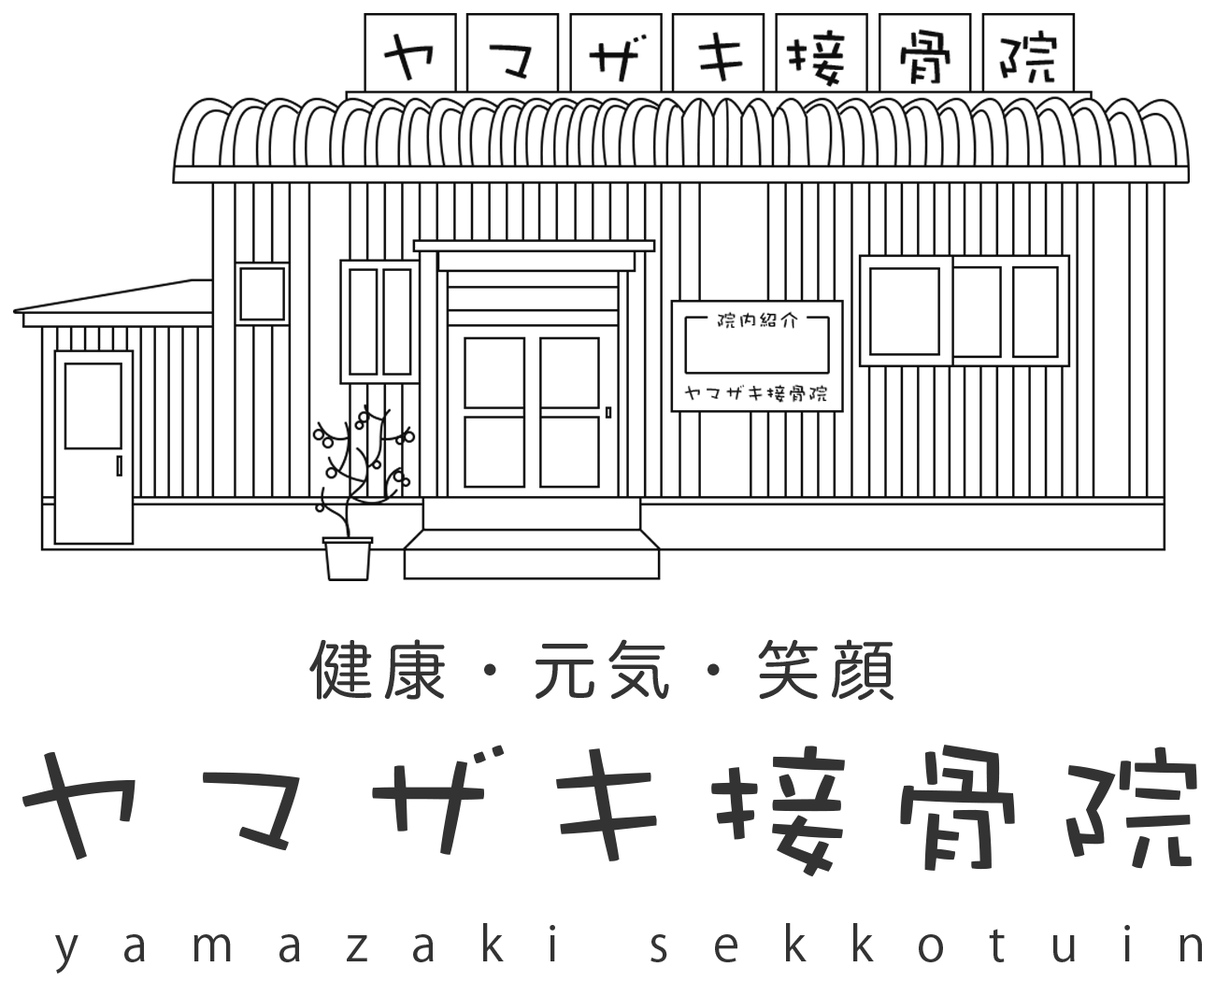
<style>
.page{position:relative;width:1215px;height:981px;background:#ffffff}
.page>*{position:absolute;margin:0}
.t1{font:64.3px "HiraMaruProN-W4";letter-spacing:0.16em;color:#333333}
.t2{font:160.8px "DFWaWaSC-W5";letter-spacing:0.09em;color:#333333}
.t3{font:48.2px "KozGoPr6N-Regular";letter-spacing:0.9em;color:#333333}
.t4{font:37.5px "KozGoPr6N-Regular";letter-spacing:0.9em;color:#333333}
</style>
<div class="page">
<p class="t1" style="left:309px;top:639px;width:585px;height:62px">健康・元気・笑顔</p>
<p class="t2" style="left:22px;top:745px;width:1175px;height:133px">ヤマザキ接骨院</p>
<p class="t3" style="left:55px;top:923px;width:500px;height:51px"><span class="t4">　</span>yamazaki</p>
<p class="t3" style="left:651px;top:923px;width:551px;height:40px">sekkotuin</p>
</div>
